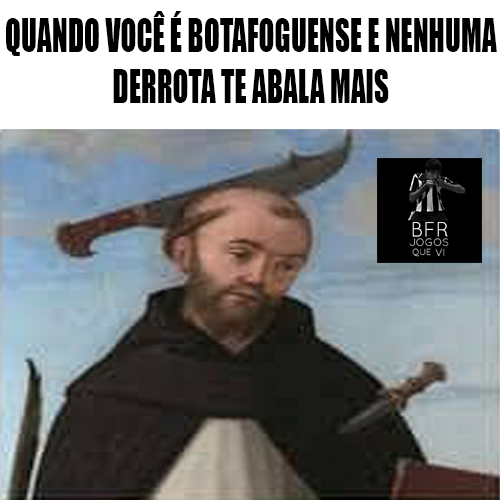
<style>
.page{position:relative;width:500px;height:500px}
.page>*{position:absolute;margin:0}
.t1{font:42.5px "Impact";color:#000000;scale:0.69 1}
</style>
<div class="page">
<p class="t1" style="left:6px;top:11px;width:491px;height:92px;text-align:center">QUANDO VOCÊ É BOTAFOGUENSE E NENHUMA DERROTA TE ABALA MAIS</p>
</div>
